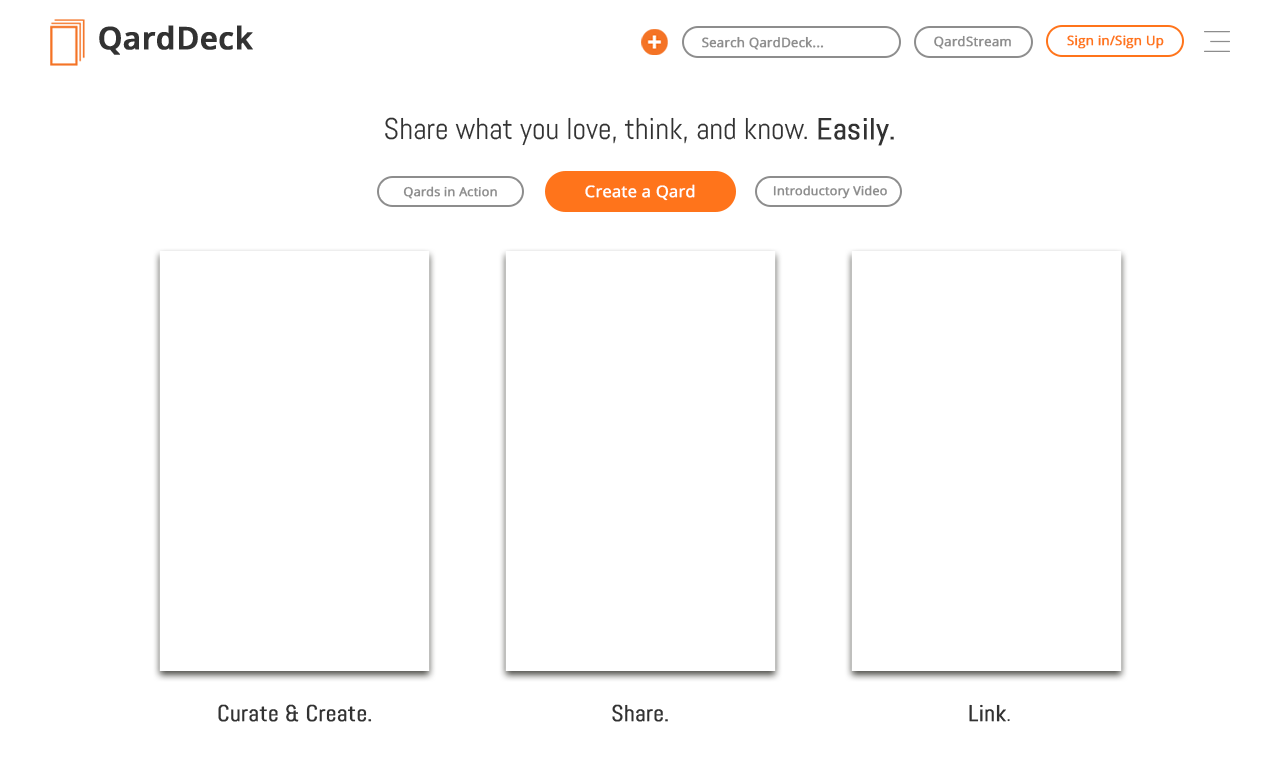
<style>
.page{position:relative;width:1280px;height:768px;background:#ffffff}
.page>*{position:absolute;margin:0}
.t1{font:30.9px "OpenSans-Semibold";color:#323232;font-weight:bold}
.t2{font:13px "OpenSans";color:#8d8d8d;font-weight:bold}
.t3{font:13px "OpenSans";color:#ff741b;font-weight:bold}
.t4{font:30px "Abel-Regular";color:#323232}
.t5{font:30px "Abel-Regular";color:#323232;font-weight:bold}
.t6{font:16px "OpenSans";color:#ffffff;font-weight:bold}
.t7{font:12.2px "OpenSans";color:#8d8d8d;font-weight:bold}
.t8{font:23px "Abel-Regular";color:#323232;font-weight:bold}
.t9{font:23px "Abel-Regular";color:#323232}
</style>
<div class="page">
<p class="t1" style="left:99px;top:25px;width:154px;height:30px">QardDeck</p>
<p class="t2" style="left:702px;top:36px;width:122px;height:14px">Search QardDeck...</p>
<p class="t2" style="left:934px;top:35px;width:77px;height:14px">QardStream</p>
<p class="t3" style="left:1067px;top:35px;width:97px;height:14px">Sign in/Sign Up</p>
<p class="t4" style="left:385px;top:117px;width:509px;height:29px">Share what you love, think, and know. <span class="t5">Easily.</span></p>
<p class="t6" style="left:585px;top:184px;width:110px;height:17px">Create a Qard</p>
<p class="t7" style="left:773px;top:185px;width:114px;height:14px">Introductory Video</p>
<p class="t7" style="left:403px;top:186px;width:94px;height:13px">Qards in Action</p>
<p class="t8" style="left:218px;top:704px;width:154px;height:18px">Curate &amp; Create.</p>
<p class="t8" style="left:612px;top:704px;width:56px;height:18px">Share.</p>
<p class="t8" style="left:969px;top:704px;width:41px;height:18px">Link<span class="t9">.</span></p>
</div>
